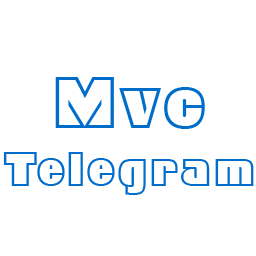
<style>
.page{position:relative;width:256px;height:256px;background:#ffffff}
.page>*{position:absolute;margin:0}
.t1{font:48px "G2Geometric885BT-RegularD";letter-spacing:0.01em;color:#006dca}
.t2{font:72px "G2Geometric885BT-RegularD";letter-spacing:0.01em;color:#006dca}
</style>
<div class="page">
<p class="t1" style="left:3px;top:77px;width:251px;height:118px;text-align:center"><span class="t2">Mvc<br></span>Telegram</p>
</div>
